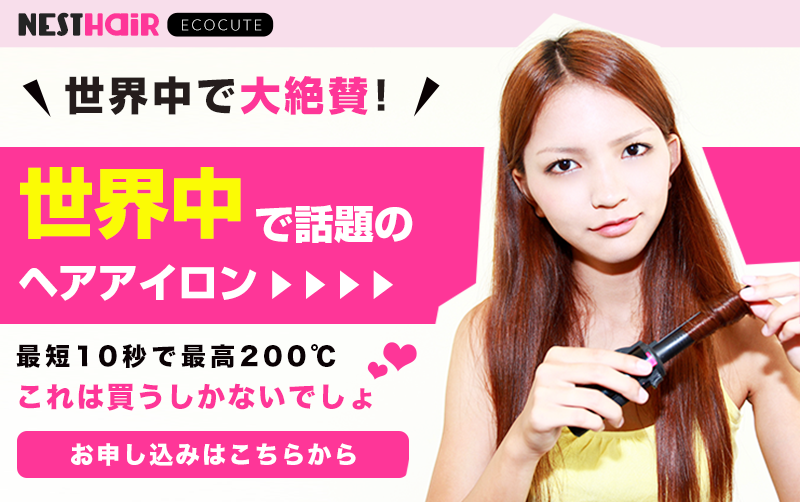
<style>
.page{position:relative;width:800px;height:502px;background:#fe3698}
.page>*{position:absolute;margin:0}
.t1{font:25.9px "Lemondrop-Bold";color:#242424}
.t2{font:25.9px "Lemondrop-Bold";color:#fe3698}
.t3{font:15.1px "Lato-Light";letter-spacing:0.12em}
.t4{font:40px "ShinGoUpr-Heavy";letter-spacing:0.1em;color:#251d1c}
.t5{font:40px "ShinGoUpr-Heavy";letter-spacing:0.1em;color:#fe3698}
.t6{font:39.9px/64.8px "ShinGoUpr-Heavy";color:#ffffff}
.t7{font:75.6px/64.8px "ShinGoUpr-Heavy";color:#fbfb05}
.t8{font:31.3px/64.8px "ShinGoUpr-Heavy";letter-spacing:0.08em;color:#ffffff}
.t9{font:24.9px/6.9px "HiraKakuStdN-W8";letter-spacing:0.18em;color:#0a0204}
.t10{font:28px/6.9px "HiraKakuStdN-W8";letter-spacing:0.08em;color:#fe3698}
.t11{font:24px "HiraKakuStdN-W8";letter-spacing:0.1em;color:#ffffff}
</style>
<div class="page">
<p class="t1" style="left:18px;top:12px;width:141px;height:24px">NEST<span class="t2">hair</span></p>
<p class="t3" style="left:182px;top:19px;width:80px;height:12px">ECOCUTE</p>
<p class="t4" style="left:65px;top:76px;width:320px;height:39px">世界中で<span class="t5">大絶賛</span>!</p>
<p class="t6" style="left:19px;top:167px;width:394px;height:134px"><span class="t7">世界中</span>で話題の<br>ヘアアイロン<span class="t8">▶︎▶︎▶︎▶︎</span></p>
<p class="t9" style="left:16px;top:344px;width:356px;height:67px">最短10秒で最高200℃<br><span class="t10">これは買うしかないでしょ</span></p>
<p class="t11" style="left:71px;top:443px;width:285px;height:23px">お申し込みはこちらから</p>
</div>
